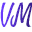
<style>
.page{position:relative;width:32px;height:32px;background:#ffffff}
.page>*{position:absolute;margin:0}
.t1{font:27px "Satisfy-Regular"}
</style>
<div class="page">
<p class="t1" style="left:0px;top:2px;width:33px;height:25px">VM</p>
</div>
